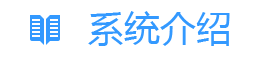
<style>
.page{position:relative;width:260px;height:60px;background:#ffffff}
.page>*{position:absolute;margin:0}
.t1{font:36px "MicrosoftYaHei";color:#3399ff}
</style>
<div class="page">
<p class="t1" style="left:88px;top:11px;width:142px;height:35px">系统介绍</p>
</div>
